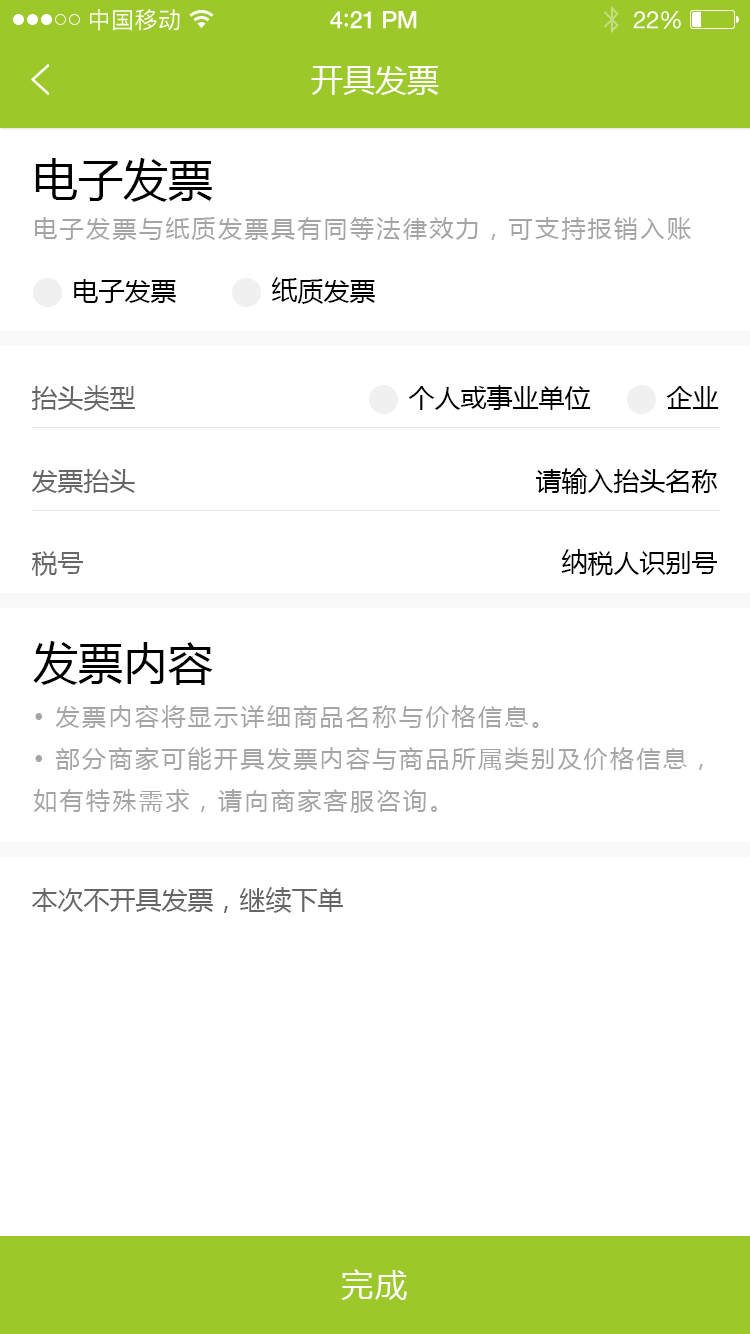
<style>
.page{position:relative;width:750px;height:1334px;background:#ffffff}
.page>*{position:absolute;margin:0}
.t1{font:23px "PingFangSC-Regular";letter-spacing:0.02em;color:#ffffff}
.t2{font:24px "HelveticaNeue-Medium";letter-spacing:-0.02em;color:#ffffff}
.t3{font:26px "Avenir-Medium";letter-spacing:-0.02em;color:#ffffff}
.t4{font:24px "HelveticaNeue";letter-spacing:-0.02em;color:#ffffff}
.t5{font:32px "MicrosoftYaHei";color:#ffffff;text-transform:uppercase}
.t6{font:45px "MicrosoftYaHei";color:#000000;text-transform:uppercase}
.t7{font:24px "MicrosoftYaHei";letter-spacing:0.1em;color:#a5a5a5;text-transform:uppercase}
.t8{font:26px "MicrosoftYaHei";color:#000000;text-transform:uppercase}
.t9{font:26px "MicrosoftYaHei";color:#666666;text-transform:uppercase}
.t10{font:32px "MicrosoftYaHei";letter-spacing:0.06em;color:#ffffff;text-transform:uppercase}
</style>
<div class="page">
<p class="t1" style="left:90px;top:9px;width:90px;height:22px">中国移动</p>
<p class="t2" style="left:330px;top:11px;width:87px;height:18px">4<span class="t3">:</span>21 PM</p>
<p class="t4" style="left:633px;top:11px;width:48px;height:18px">22%</p>
<p class="t5" style="left:311px;top:66px;width:128px;height:29px">开具发票</p>
<p class="t6" style="left:35px;top:158px;width:177px;height:44px">电子发票</p>
<p class="t7" style="left:35px;top:217px;width:656px;height:23px">电子发票与纸质发票具有同等法律效力，可支持报销入账</p>
<p class="t8" style="left:74px;top:279px;width:102px;height:24px">电子发票</p>
<p class="t8" style="left:271px;top:277px;width:104px;height:27px">纸质发票</p>
<p class="t9" style="left:31px;top:385px;width:104px;height:26px">抬头类型</p>
<p class="t8" style="left:408px;top:385px;width:183px;height:25px">个人或事业单位</p>
<p class="t8" style="left:666px;top:386px;width:53px;height:23px">企业</p>
<p class="t9" style="left:31px;top:469px;width:104px;height:24px">发票抬头</p>
<p class="t8" style="left:536px;top:468px;width:181px;height:26px">请输入抬头名称</p>
<p class="t9" style="left:31px;top:551px;width:52px;height:25px">税号</p>
<p class="t8" style="left:561px;top:549px;width:156px;height:27px">纳税人识别号</p>
<p class="t6" style="left:33px;top:641px;width:180px;height:44px">发票内容</p>
<p class="t7" style="left:33px;top:705px;width:670px;height:108px">• 发票内容将显示详细商品名称与价格信息。<br>• 部分商家可能开具发票内容与商品所属类别及价格信息，<br>如有特殊需求，请向商家客服咨询。</p>
<p class="t9" style="left:32px;top:887px;width:311px;height:26px">本次不开具发票，继续下单</p>
<p class="t10" style="left:341px;top:1269px;width:66px;height:31px">完成</p>
</div>
